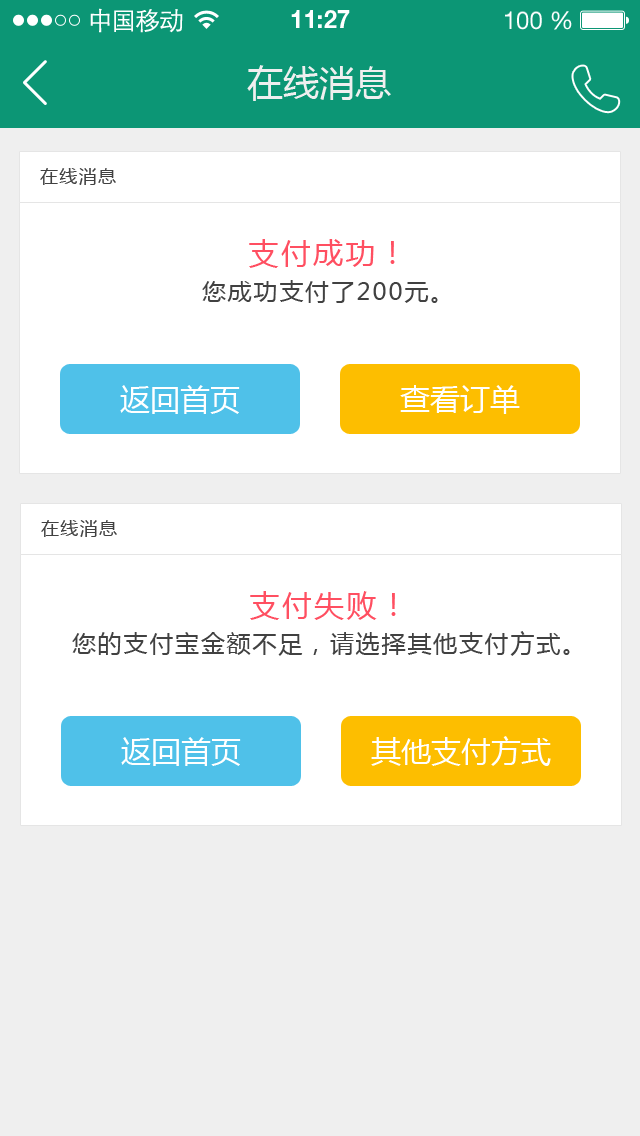
<style>
.page{position:relative;width:640px;height:1136px;background:#ffffff}
.page>*{position:absolute;margin:0}
.t1{font:25px "STXihei";letter-spacing:-0.045em;color:#fefefe}
.t2{font:24.6px "HelveticaNeueLTPro-Bd";color:#ffffff}
.t3{font:24.6px "HelveticaNeueLTStd-Roman";color:#ffffff}
.t4{font:36px "MicrosoftYaHei";color:#efefef}
.t5{font:18px "MicrosoftYaHei";letter-spacing:0.075em;color:#414141}
.t6{font:24px/36px "MicrosoftYaHei";letter-spacing:0.075em;color:#414141}
.t7{font:30px/36px "MicrosoftYaHei";letter-spacing:0.075em;color:#ff4f61}
.t8{font:30px "MicrosoftYaHei";color:#ffffff}
</style>
<div class="page">
<p class="t1" style="left:90px;top:8px;width:93px;height:25px">中国移动</p>
<p class="t2" style="left:291px;top:10px;width:59px;height:18px">11:27</p>
<p class="t3" style="left:505px;top:11px;width:67px;height:19px">100 %</p>
<p class="t4" style="left:247px;top:65px;width:144px;height:36px">在线消息</p>
<p class="t5" style="left:40px;top:168px;width:76px;height:17px">在线消息</p>
<p class="t6" style="left:202px;top:239px;width:236px;height:64px;text-align:center"><span class="t7">支付成功！<br></span>您成功支付了200元。</p>
<p class="t8" style="left:120px;top:385px;width:120px;height:29px">返回首页</p>
<p class="t8" style="left:400px;top:385px;width:120px;height:29px">查看订单</p>
<p class="t5" style="left:41px;top:520px;width:76px;height:17px">在线消息</p>
<p class="t6" style="left:72px;top:591px;width:498px;height:65px;text-align:center"><span class="t7">支付失败！<br></span>您的支付宝金额不足，请选择其他支付方式。</p>
<p class="t8" style="left:121px;top:737px;width:120px;height:29px">返回首页</p>
<p class="t8" style="left:371px;top:736px;width:180px;height:30px">其他支付方式</p>
</div>
